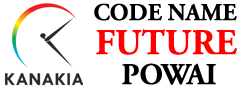
<style>
.page{position:relative;width:250px;height:90px;background:#ffffff}
.page>*{position:absolute;margin:0}
.t1{font:24px "AGaramondPro-Bold";color:#000000}
.t2{font:36px "AGaramondPro-Bold";color:#ff0000}
.t3{font:30px "AGaramondPro-Bold";color:#000000}
</style>
<div class="page">
<p class="t1" style="left:94px;top:3px;width:143px;height:18px">CODE NAME</p>
<p class="t2" style="left:96px;top:29px;width:141px;height:26px">FUTURE</p>
<p class="t3" style="left:122px;top:63px;width:94px;height:22px">POWAI</p>
</div>
